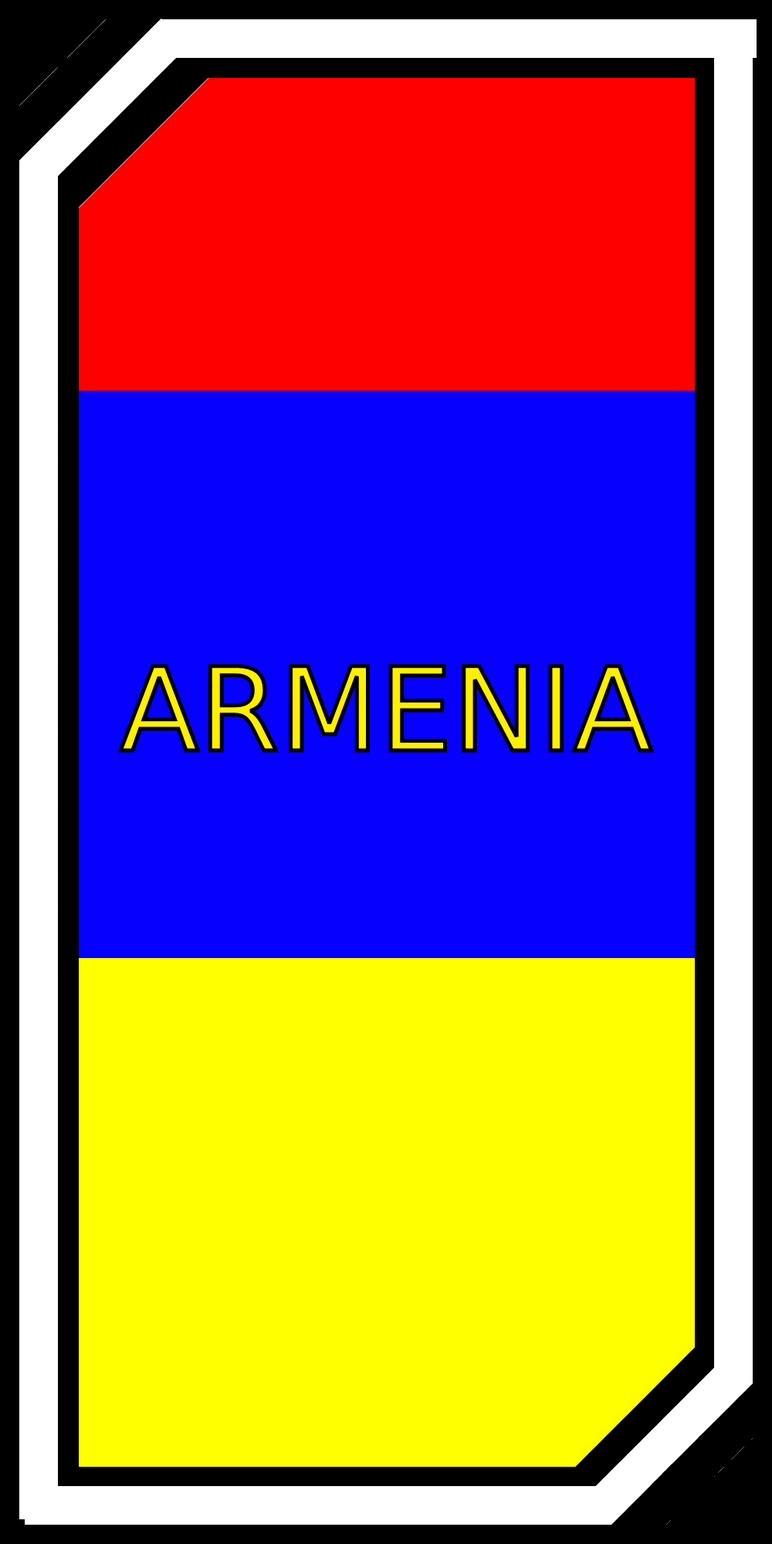
<style>
.page{position:relative;width:772px;height:1544px;background:#0600ff}
.page>*{position:absolute;margin:0}
.t1{font:115.8px "DejaVuSans"}
</style>
<div class="page">
<p class="t1" style="left:118px;top:664px;width:536px;height:89px">ARMENIA</p>
</div>
